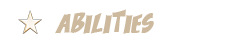
<style>
.page{position:relative;width:250px;height:45px;background:#ffffff}
.page>*{position:absolute;margin:0}
.t1{font:30px "HoustonComicsPersonalUse";color:#cdb99d}
</style>
<div class="page">
<p class="t1" style="left:55px;top:9px;width:99px;height:25px">ABILITIES</p>
</div>
